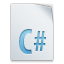
<style>
.page{position:relative;width:64px;height:64px;background:#ffffff}
.page>*{position:absolute;margin:0}
.t1{font:36px "MyriadPro-BoldCond"}
.t2{font:30px "MyriadPro-BoldCond"}
</style>
<div class="page">
<p class="t1" style="left:19px;top:29px;width:13px;height:25px">C</p>
<p class="t2" style="left:34px;top:31px;width:12px;height:20px">#</p>
</div>
